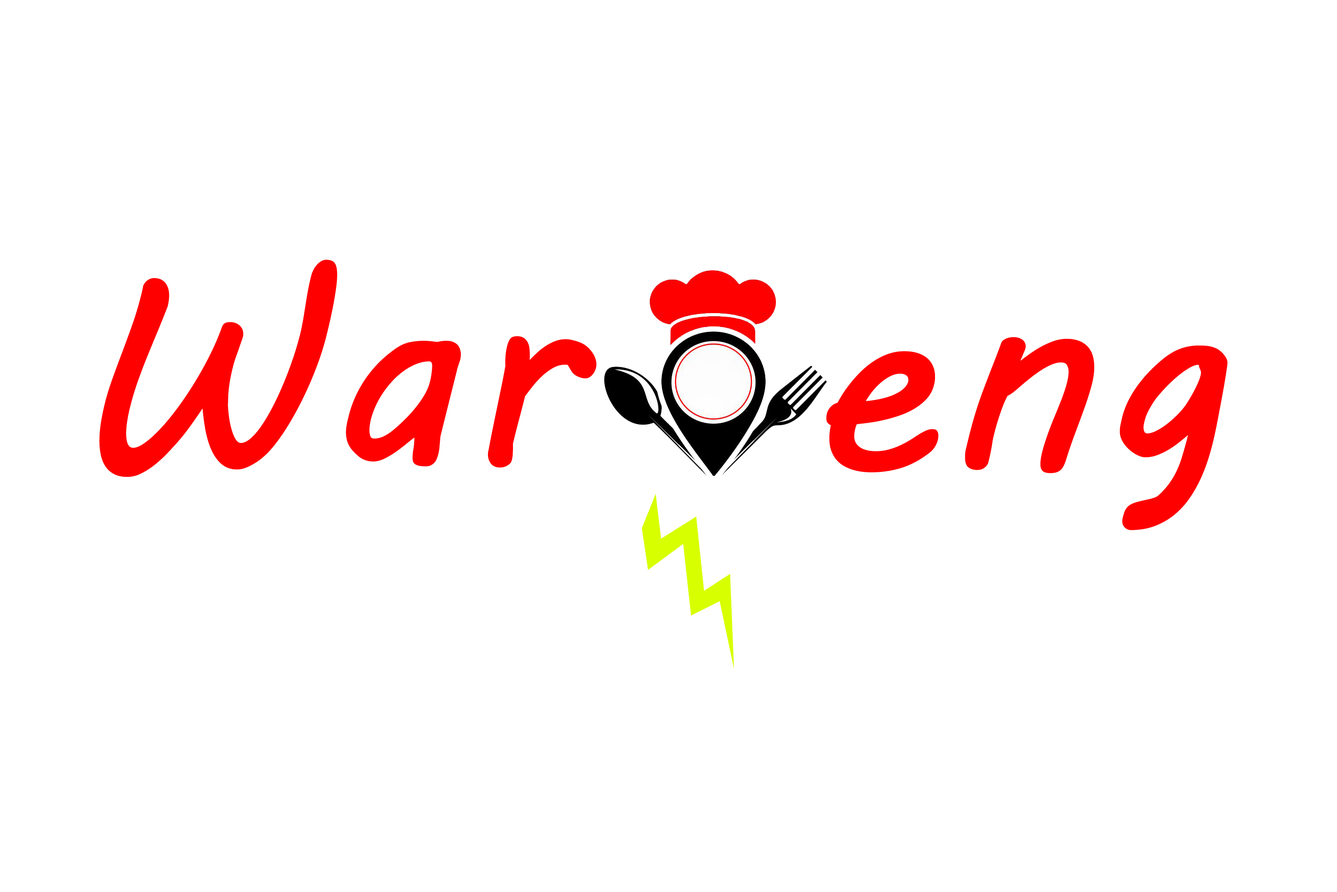
<style>
.page{position:relative;width:1337px;height:892px;background:#ffffff}
.page>*{position:absolute;margin:0}
.t1{font:267.5px "MVBoli";color:#fe0000;font-weight:bold}
</style>
<div class="page">
<p class="t1" style="left:99px;top:259px;width:498px;height:218px">War</p>
<p class="t1" style="left:827px;top:337px;width:401px;height:193px">eng</p>
</div>
